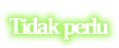
<style>
.page{position:relative;width:119px;height:48px;background:#ffffff}
.page>*{position:absolute;margin:0}
.t1{font:22px "HeiseiMinStd-W7";letter-spacing:-0.08em;color:#ffffff;font-weight:bold}
</style>
<div class="page">
<p class="t1" style="left:9px;top:17px;width:100px;height:23px">Tidak perlu</p>
</div>
